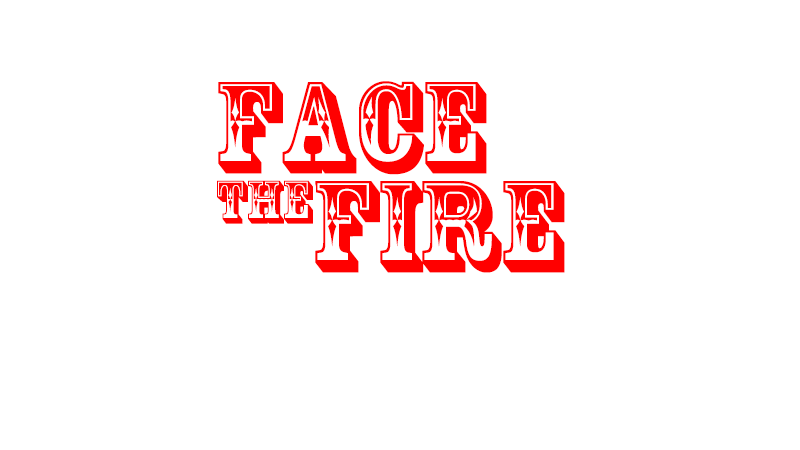
<style>
.page{position:relative;width:800px;height:450px;background:#ffffff}
.page>*{position:absolute;margin:0}
.t1{font:121.9px "RosewoodStd-Regular";color:#ff0000}
.t2{font:57.6px "RosewoodStd-Regular";color:#ff0000}
</style>
<div class="page">
<p class="t1" style="left:218px;top:81px;width:269px;height:94px">FACE</p>
<p class="t2" style="left:217px;top:180px;width:96px;height:44px">THE</p>
<p class="t1" style="left:315px;top:181px;width:250px;height:92px">FIRE</p>
</div>
